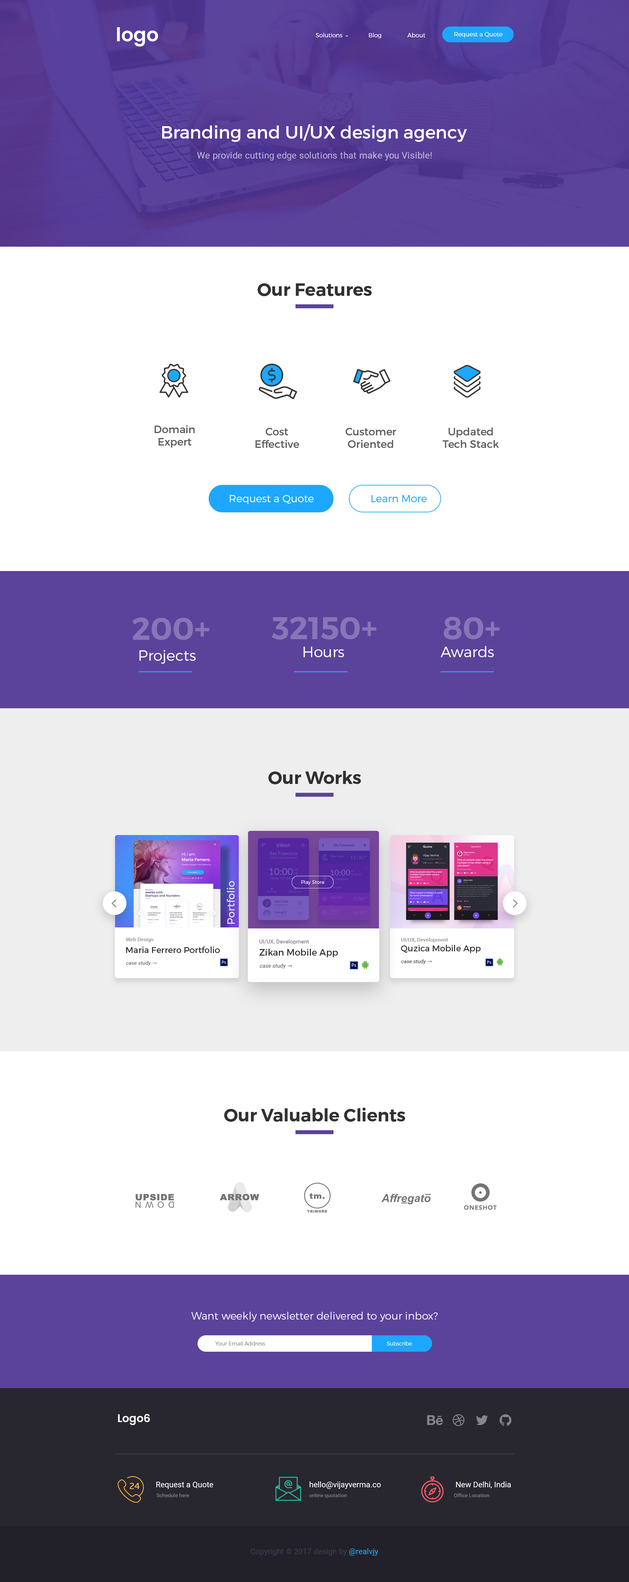
<style>
.page{position:relative;width:629px;height:1582px;background:#ffffff}
.page>*{position:absolute;margin:0}
.t1{font:18.9px "Poppins-SemiBold";color:#ffffff}
.t2{font:5.9px "Montserrat-Light";color:#ffffff}
.t3{font:17.7px "Montserrat-Regular";color:#ffffff}
.t4{font:9.2px "Roboto-Regular";color:#bbb2d4}
.t5{font:17.7px "Montserrat-SemiBold";color:#262626}
.t6{font:10.5px "Montserrat-Regular";color:#5e5e5e}
.t7{font:10.3px "Montserrat-Light";color:#ffffff}
.t8{font:10.3px "Montserrat-Light";color:#1da7ff}
.t9{font:31.5px "Montserrat-SemiBold";color:#8776b7}
.t10{font:14.8px "Montserrat-Light";color:#ffffff}
.t11{font:4.8px "Montserrat-Light";color:#ffffff}
.t12{font:5.2px "Roboto-Medium";color:#8e8e8e}
.t13{font:5.5px "Roboto-Medium";color:#8e8e8e}
.t14{font:8.5px "Montserrat-Regular";color:#313131}
.t15{font:9px "Montserrat-Regular";color:#313131}
.t16{font:5.2px "Roboto-Italic";color:#4a4b4c}
.t17{font:5.9px "SegoeUISymbol";color:#4a4b4c}
.t18{font:5.5px "Roboto-Italic";color:#4a4b4c}
.t19{font:6.2px "SegoeUISymbol";color:#4a4b4c}
.t20{font:5.2px "Roboto-Italic";color:#191a1c}
.t21{font:5.9px "SegoeUISymbol";color:#191a1c}
.t22{font:10.5px "Montserrat-Light";color:#ffffff}
.t23{font:5.2px "Montserrat-Light";color:#919191}
.t24{font:5.2px "Montserrat-Light";color:#ffffff}
.t25{font:10.8px "Poppins-SemiBold";color:#ffffff}
.t26{font:7.9px "Roboto-Regular";color:#ffffff}
.t27{font:5.2px "Roboto-Regular";color:#89888d}
.t28{font:7.9px "Roboto-Regular";color:#3e3c4d}
.t29{font:7.9px "Roboto-Regular";color:#1da7ff}
</style>
<div class="page">
<p class="t1" style="left:117px;top:27px;width:41px;height:20px">logo</p>
<p class="t2" style="left:316px;top:33px;width:110px;height:5px">Solutions                Blog                About</p>
<p class="t2" style="left:455px;top:32px;width:48px;height:5px">Request a Quote</p>
<p class="t3" style="left:162px;top:124px;width:305px;height:18px">Branding and UI/UX design agency</p>
<p class="t4" style="left:197px;top:152px;width:235px;height:9px">We provide cutting edge solutions that make you Visible!</p>
<p class="t5" style="left:258px;top:283px;width:114px;height:13px;opacity:0.95">Our Features</p>
<p class="t6" style="left:155px;top:425px;width:40px;height:23px;text-align:center">Domain<br>Expert</p>
<p class="t6" style="left:256px;top:428px;width:43px;height:20px;text-align:center">Cost<br>Effective</p>
<p class="t6" style="left:346px;top:428px;width:51px;height:20px;text-align:center">Customer<br>Oriented</p>
<p class="t6" style="left:443px;top:428px;width:56px;height:20px;text-align:center">Updated<br>Tech Stack</p>
<p class="t7" style="left:230px;top:495px;width:84px;height:9px">Request a Quote</p>
<p class="t8" style="left:372px;top:495px;width:55px;height:7px">Learn More</p>
<p class="t9" style="left:132px;top:618px;width:77px;height:22px">200+</p>
<p class="t9" style="left:272px;top:617px;width:105px;height:23px">32150+</p>
<p class="t9" style="left:444px;top:617px;width:56px;height:23px">80+</p>
<p class="t10" style="left:139px;top:650px;width:57px;height:14px">Projects</p>
<p class="t10" style="left:303px;top:647px;width:41px;height:10px">Hours</p>
<p class="t10" style="left:441px;top:646px;width:53px;height:11px">Awards</p>
<p class="t5" style="left:268px;top:771px;width:93px;height:14px;opacity:0.95">Our Works</p>
<p class="t11" style="left:301px;top:881px;width:23px;height:4px">Play Store</p>
<p class="t12" style="left:126px;top:938px;width:27px;height:4px">Web Design</p>
<p class="t13" style="left:259px;top:940px;width:50px;height:5px">UI/UX, Development</p>
<p class="t12" style="left:401px;top:938px;width:47px;height:5px">UI/UX, Development</p>
<p class="t14" style="left:126px;top:947px;width:94px;height:6px">Maria Ferrero Portfolio</p>
<p class="t15" style="left:260px;top:949px;width:78px;height:9px">Zikan Mobile App</p>
<p class="t14" style="left:401px;top:945px;width:80px;height:8px">Quzica Mobile App</p>
<p class="t16" style="left:126px;top:961px;width:31px;height:5px">case study <span class="t17">→</span></p>
<p class="t18" style="left:260px;top:964px;width:32px;height:5px">case study <span class="t19">→</span></p>
<p class="t20" style="left:401px;top:960px;width:31px;height:4px">case study <span class="t21">→</span></p>
<p class="t5" style="left:224px;top:1108px;width:181px;height:14px;opacity:0.95">Our Valuable Clients</p>
<p class="t22" style="left:191px;top:1312px;width:247px;height:10px;opacity:0.95">Want weekly newsletter delivered to your inbox?</p>
<p class="t23" style="left:215px;top:1342px;width:50px;height:4px">Your Email Address</p>
<p class="t24" style="left:387px;top:1342px;width:25px;height:4px">Subscribe</p>
<p class="t25" style="left:118px;top:1414px;width:32px;height:11px">Logo6</p>
<p class="t26" style="left:310px;top:1482px;width:71px;height:7px">hello@vijayverma.co</p>
<p class="t26" style="left:456px;top:1482px;width:55px;height:7px">New Delhi, India</p>
<p class="t26" style="left:156px;top:1482px;width:57px;height:7px">Request a Quote</p>
<p class="t27" style="left:157px;top:1494px;width:32px;height:4px">Schedule here</p>
<p class="t27" style="left:309px;top:1494px;width:38px;height:5px">online quotation</p>
<p class="t27" style="left:454px;top:1494px;width:35px;height:4px">Office Location</p>
<p class="t28" style="left:251px;top:1549px;width:127px;height:7px"><span class="t26"><br></span>Copyright © 2017 design by <span class="t29">@realvjy</span></p>
</div>
